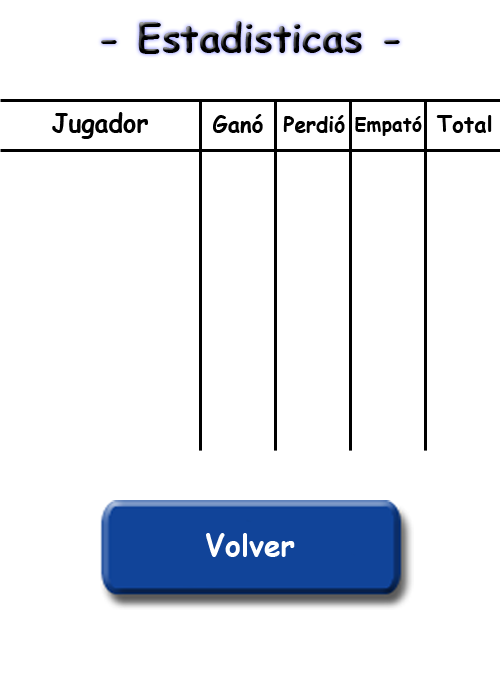
<style>
.page{position:relative;width:500px;height:700px;background:#ffffff}
.page>*{position:absolute;margin:0}
.t1{font:38.9px "ComicSansMS-Bold";color:#000000}
.t2{font:25px "ComicSansMS-Bold";color:#000000}
.t3{font:22.2px "ComicSansMS-Bold";color:#000000}
.t4{font:20.8px "ComicSansMS-Bold";color:#000000}
.t5{font:19.4px "ComicSansMS-Bold";color:#000000}
.t6{font:30px "ComicSansMS-Bold";color:#ffffff}
</style>
<div class="page">
<p class="t1" style="left:101px;top:21px;width:299px;height:33px">- Estadisticas -</p>
<p class="t2" style="left:52px;top:112px;width:96px;height:27px">Jugador</p>
<p class="t3" style="left:213px;top:114px;width:50px;height:19px">Ganó</p>
<p class="t4" style="left:283px;top:115px;width:62px;height:18px">Perdió</p>
<p class="t5" style="left:355px;top:116px;width:67px;height:20px">Empató</p>
<p class="t3" style="left:436px;top:115px;width:56px;height:18px">Total</p>
<p class="t6" style="left:206px;top:533px;width:89px;height:24px">Volver</p>
</div>
